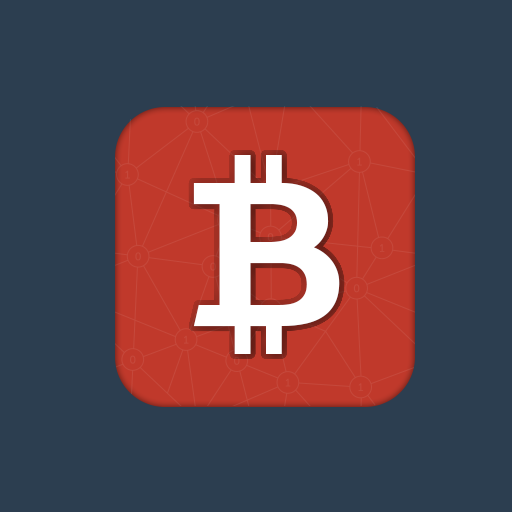
<style>
.page{position:relative;width:512px;height:512px;background:#2c3e50}
.page>*{position:absolute;margin:0}
.t1{font:200px "MicrosoftSansSerif";color:#ffffff}
</style>
<div class="page">
<p class="t1" style="left:193px;top:155px;width:147px;height:199px">₿</p>
</div>
